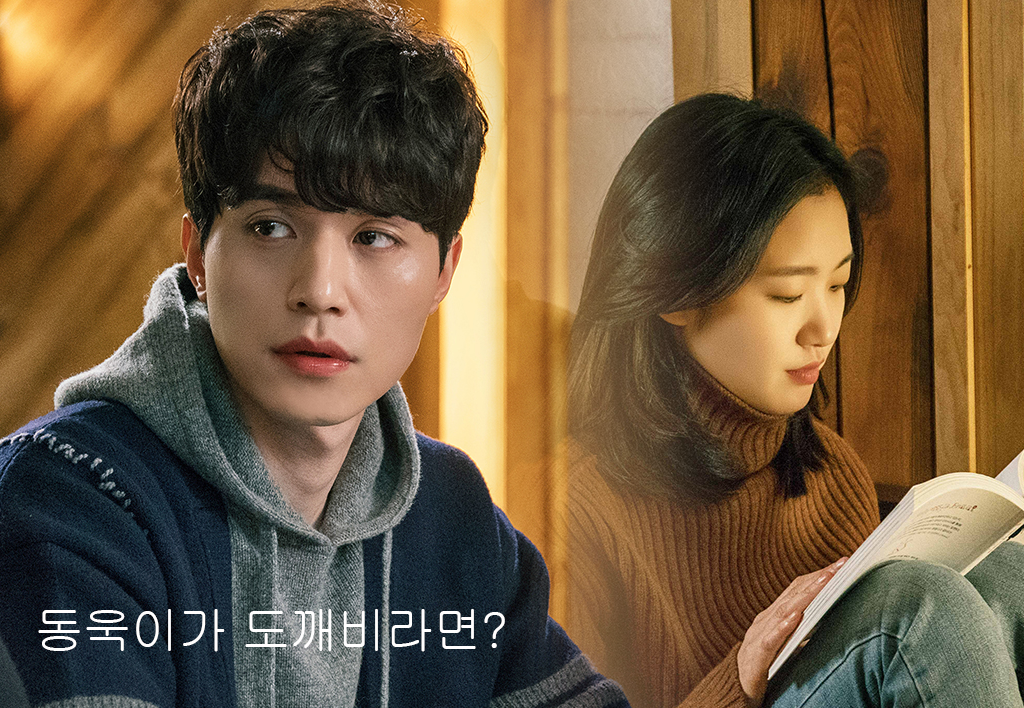
<style>
.page{position:relative;width:1024px;height:708px}
.page>*{position:absolute;margin:0}
.t1{font:50.3px "Gulim";letter-spacing:-0.045em;color:#fffefe}
</style>
<div class="page">
<p class="t1" style="left:38px;top:609px;width:467px;height:43px">동욱이가 도깨비라면?</p>
</div>
